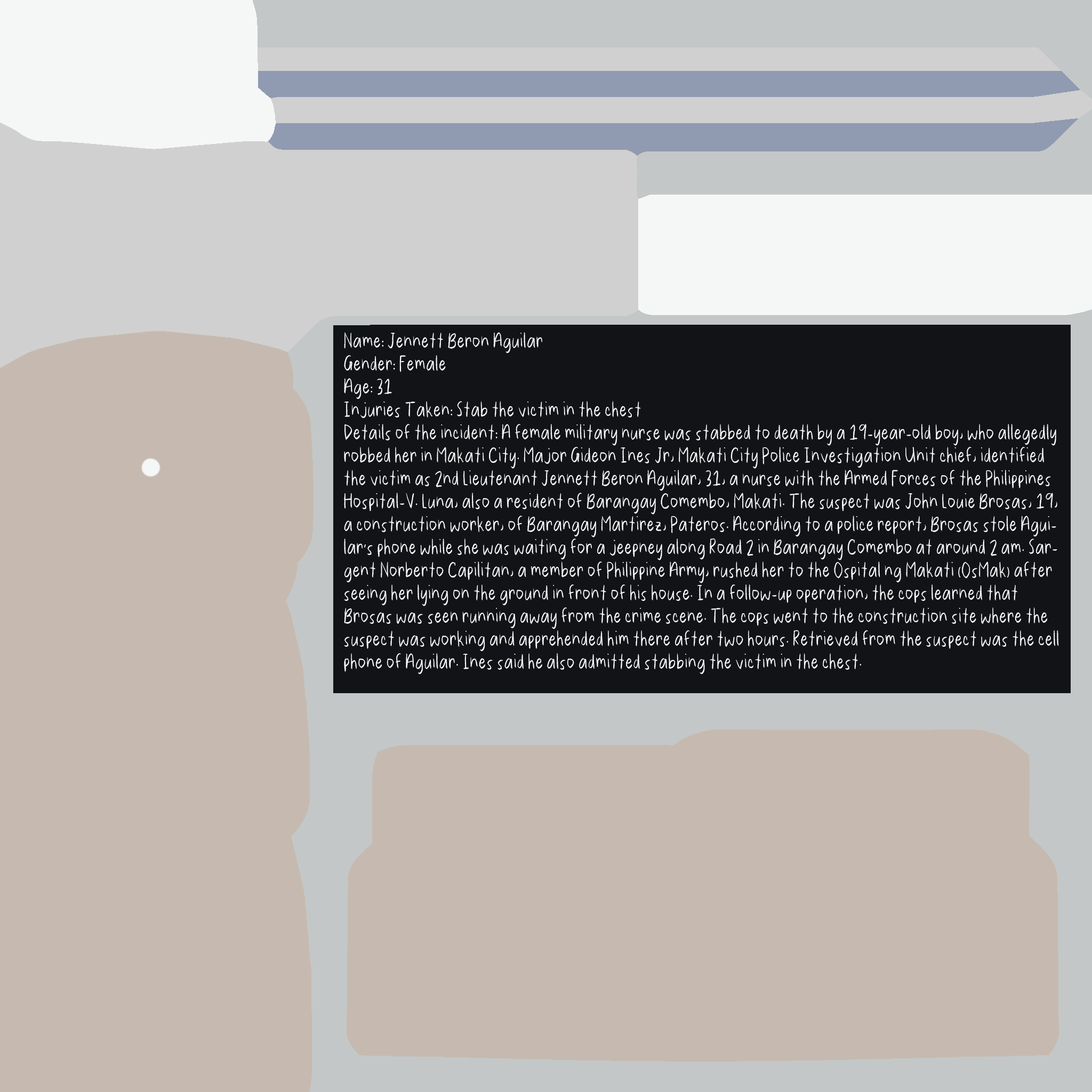
<style>
.page{position:relative;width:1092px;height:1092px;background:#c6bab0}
.page>*{position:absolute;margin:0}
.t1{font:12.5px/22.9px "CallieChalkFont-Regular";letter-spacing:0.1em;color:#ffffff;scale:0.77 1}
.t2{font:12.5px/22.9px "MyriadPro-Regular";letter-spacing:0.1em;color:#ffffff;scale:0.77 1}
</style>
<div class="page">
<p class="t1" style="left:344px;top:332px;width:715px;height:342px">Name<span class="t2">:</span> Jennett Beron Aguilar<br>Gender<span class="t2">:</span> Female<br>Age<span class="t2">:</span> 31<br>Injuries Taken<span class="t2">:</span> Stab the victim in the chest<br>Details of the incident<span class="t2">:</span> A female military nurse was stabbed to death by a 19-year-old boy, who allegedly robbed her in Makati City. Major Gideon Ines Jr, Makati City Police Investigation Unit chief, identified the victim as 2nd Lieutenant Jennett Beron Aguilar, 31, a nurse with the Armed Forces of the Philippines Hospital-V. Luna, also a resident of Barangay Comembo, Makati. The suspect was John Louie Brosas, 19, a construction worker, of Barangay Martirez, Pateros. According to a police report, Brosas stole Aguilar<span class="t2">’</span>s phone while she was waiting for a jeepney along Road 2 in Barangay Comembo at around 2 am. Sargent Norberto Capilitan, a member of Philippine Army, rushed her to the Ospital ng Makati <span class="t2">(</span>OsMak<span class="t2">)</span> after seeing her lying on the ground in front of his house. In a follow-up operation, the cops learned that Brosas was seen running away from the crime scene. The cops went to the construction site where the suspect was working and apprehended him there after two hours. Retrieved from the suspect was the cell phone of Aguilar. Ines said he also admitted stabbing the victim in the chest.</p>
</div>
